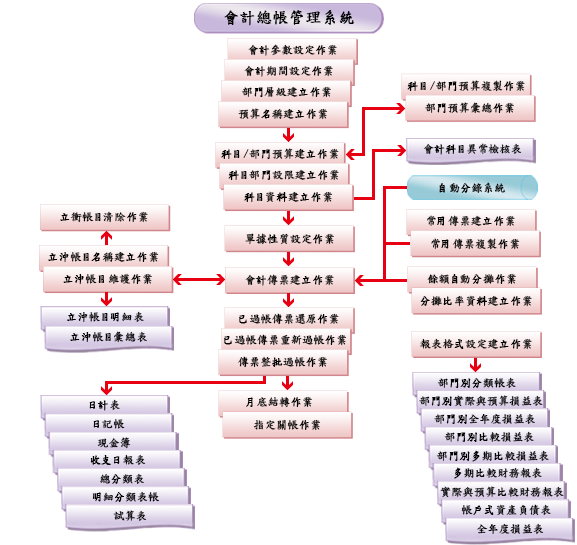
<style>
.page{position:relative;width:577px;height:545px;background:#ffffff}
.page>*{position:absolute;margin:0}
.t1{font:16px "DFKaiShu-SB-Estd-BF";color:#000000;font-weight:bold}
.t2{font:11px "DFKaiShu-SB-Estd-BF";color:#000000;font-weight:bold}
.t3{font:11px "DFKaiShu-SB-Estd-BF";letter-spacing:-0.15em;color:#000000;font-weight:bold}
.t4{font:11px "DFKaiShu-SB-Estd-BF";letter-spacing:-0.03em;color:#000000;font-weight:bold}
.t5{font:11px "DFKaiShu-SB-Estd-BF";letter-spacing:0.03em;color:#000000;font-weight:bold}
.t6{font:11px "DFKaiShu-SB-Estd-BF";letter-spacing:-0.18em;color:#000000;font-weight:bold}
.t7{font:11px "DFKaiShu-SB-Estd-BF";letter-spacing:0.05em;color:#000000;font-weight:bold}
.t8{font:11px "DFKaiShu-SB-Estd-BF";letter-spacing:-0.13em;color:#000000;font-weight:bold}
</style>
<div class="page">
<p class="t1" style="left:224px;top:10px;width:130px;height:16px">會計總帳管理系統</p>
<p class="t2" style="left:248px;top:44px;width:89px;height:12px">會計參數設定作業</p>
<p class="t2" style="left:244px;top:65px;width:89px;height:12px">會計期間設定作業</p>
<p class="t2" style="left:241px;top:86px;width:90px;height:12px">部門層級建立作業</p>
<p class="t2" style="left:407px;top:80px;width:118px;height:12px">科目/部門預算複製作業</p>
<p class="t2" style="left:425px;top:102px;width:89px;height:12px">部門預算彙總作業</p>
<p class="t2" style="left:238px;top:108px;width:90px;height:12px">預算名稱建立作業</p>
<p class="t2" style="left:221px;top:148px;width:118px;height:11px">科目/部門預算建立作業</p>
<p class="t2" style="left:423px;top:143px;width:99px;height:12px">會計科<span class="t3">目</span><span class="t4">異常</span>檢核表</p>
<p class="t2" style="left:228px;top:169px;width:111px;height:12px">科<span class="t3">目</span><span class="t5">部門</span>設限建立作業</p>
<p class="t2" style="left:439px;top:182px;width:66px;height:12px">自動分錄系統</p>
<p class="t2" style="left:244px;top:191px;width:89px;height:12px">科<span class="t6">目</span><span class="t7">資料</span>建立作業</p>
<p class="t2" style="left:60px;top:211px;width:88px;height:12px">立衝帳<span class="t6">目</span><span class="t7">清除</span>作業</p>
<p class="t2" style="left:427px;top:215px;width:88px;height:12px">常用傳票建立作業</p>
<p class="t2" style="left:245px;top:233px;width:89px;height:12px">單據性質設定作業</p>
<p class="t2" style="left:431px;top:238px;width:89px;height:12px">常用傳票複製作業</p>
<p class="t2" style="left:48px;top:251px;width:111px;height:12px">立沖帳<span class="t6">目</span><span class="t5">名稱</span>建立作業</p>
<p class="t2" style="left:63px;top:273px;width:89px;height:12px">立沖帳目維護作業</p>
<p class="t2" style="left:245px;top:274px;width:89px;height:12px">會計傳票建立作業</p>
<p class="t2" style="left:427px;top:273px;width:89px;height:12px">餘額<span class="t3">自</span><span class="t7">動分</span>攤作業</p>
<p class="t2" style="left:420px;top:295px;width:112px;height:12px">分攤比率資料建立作業</p>
<p class="t2" style="left:67px;top:311px;width:77px;height:11px">立沖帳<span class="t6">目</span><span class="t7">明細</span>表</p>
<p class="t2" style="left:239px;top:313px;width:100px;height:12px">已過帳傳票還原作業</p>
<p class="t2" style="left:70px;top:331px;width:77px;height:12px">立沖帳<span class="t6">目</span><span class="t7">彙總</span>表</p>
<p class="t2" style="left:224px;top:334px;width:123px;height:12px">已過帳傳票重新過帳作業</p>
<p class="t2" style="left:420px;top:338px;width:112px;height:12px">報表格式設定建立作業</p>
<p class="t2" style="left:238px;top:356px;width:89px;height:12px">傳票整批過帳作業</p>
<p class="t2" style="left:437px;top:377px;width:79px;height:11px">部門別分類帳表</p>
<p class="t7" style="left:89px;top:399px;width:31px;height:12px"><span class="t8">日</span>計表</p>
<p class="t2" style="left:246px;top:396px;width:66px;height:12px">月底結轉作業</p>
<p class="t2" style="left:419px;top:395px;width:124px;height:12px">部門別實際與預算損益表</p>
<p class="t2" style="left:434px;top:413px;width:101px;height:11px">部門別全年度損益表</p>
<p class="t7" style="left:93px;top:419px;width:32px;height:10px"><span class="t8">日</span>記帳</p>
<p class="t2" style="left:253px;top:419px;width:68px;height:12px">指定關帳作業</p>
<p class="t2" style="left:97px;top:437px;width:34px;height:12px">現金簿</p>
<p class="t2" style="left:444px;top:431px;width:90px;height:11px">部門別比較損益表</p>
<p class="t4" style="left:90px;top:454px;width:56px;height:11px"><span class="t2">收</span>支日<span class="t7">報表</span></p>
<p class="t2" style="left:436px;top:450px;width:113px;height:12px">部門別多期比較損益表</p>
<p class="t2" style="left:100px;top:473px;width:44px;height:11px">總分類表</p>
<p class="t2" style="left:454px;top:467px;width:88px;height:12px">多期比較財務報表</p>
<p class="t2" style="left:440px;top:486px;width:124px;height:12px">實際與預算比較財務報表</p>
<p class="t2" style="left:92px;top:491px;width:68px;height:11px">明細分類表帳</p>
<p class="t2" style="left:113px;top:510px;width:34px;height:11px">試算表</p>
<p class="t2" style="left:461px;top:504px;width:90px;height:12px">帳戶式資產負債表</p>
<p class="t2" style="left:477px;top:523px;width:67px;height:11px">全年度損益表</p>
</div>
